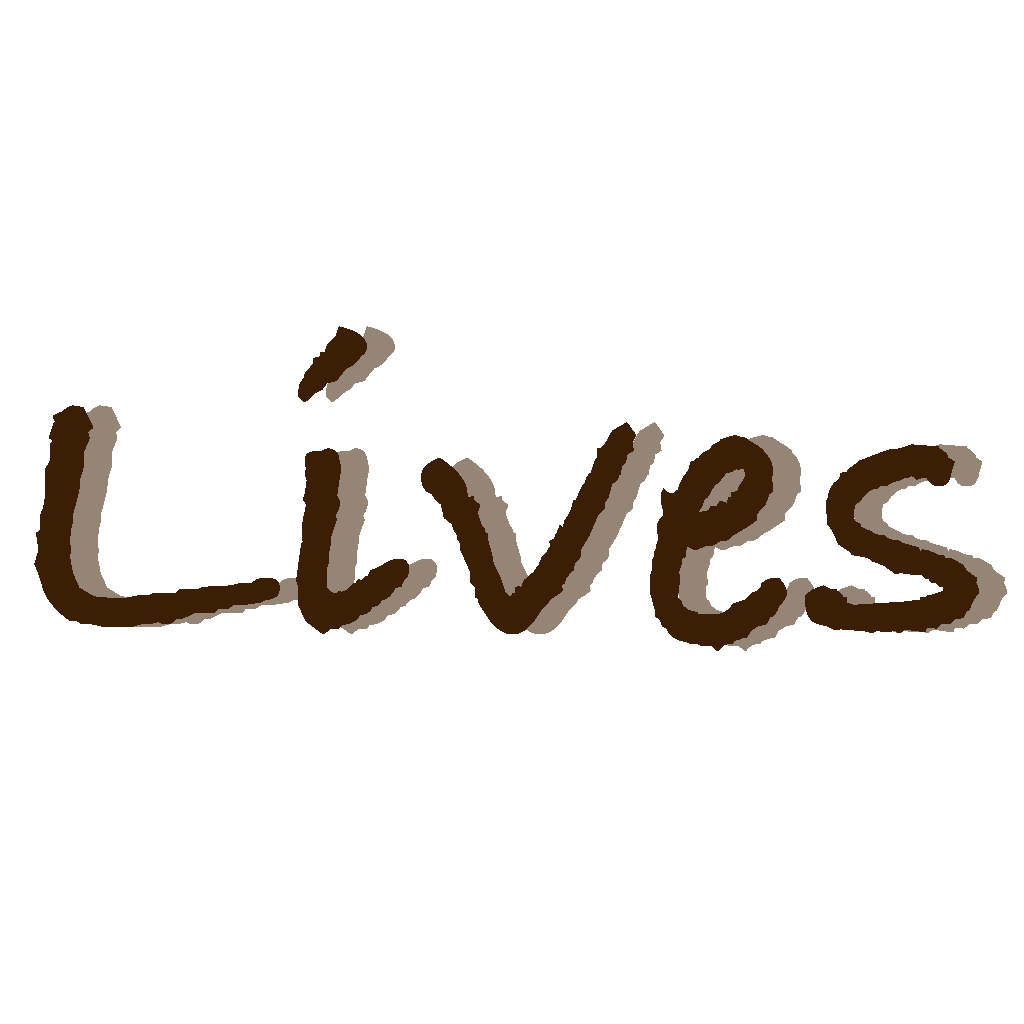
<style>
.page{position:relative;width:1024px;height:1024px;background:#ffffff}
.page>*{position:absolute;margin:0}
.t1{font:413.6px "BradleyHandITCTT-Bold";letter-spacing:0.025em;color:#3b1e03}
.t2{font:413.6px "BradleyHandITCTT-Bold";letter-spacing:0.025em}
</style>
<div class="page">
<p class="t1" style="left:34px;top:326px;width:945px;height:325px">Lives</p>
<p class="t2" style="left:62px;top:326px;width:945px;height:325px">Lives</p>
</div>
